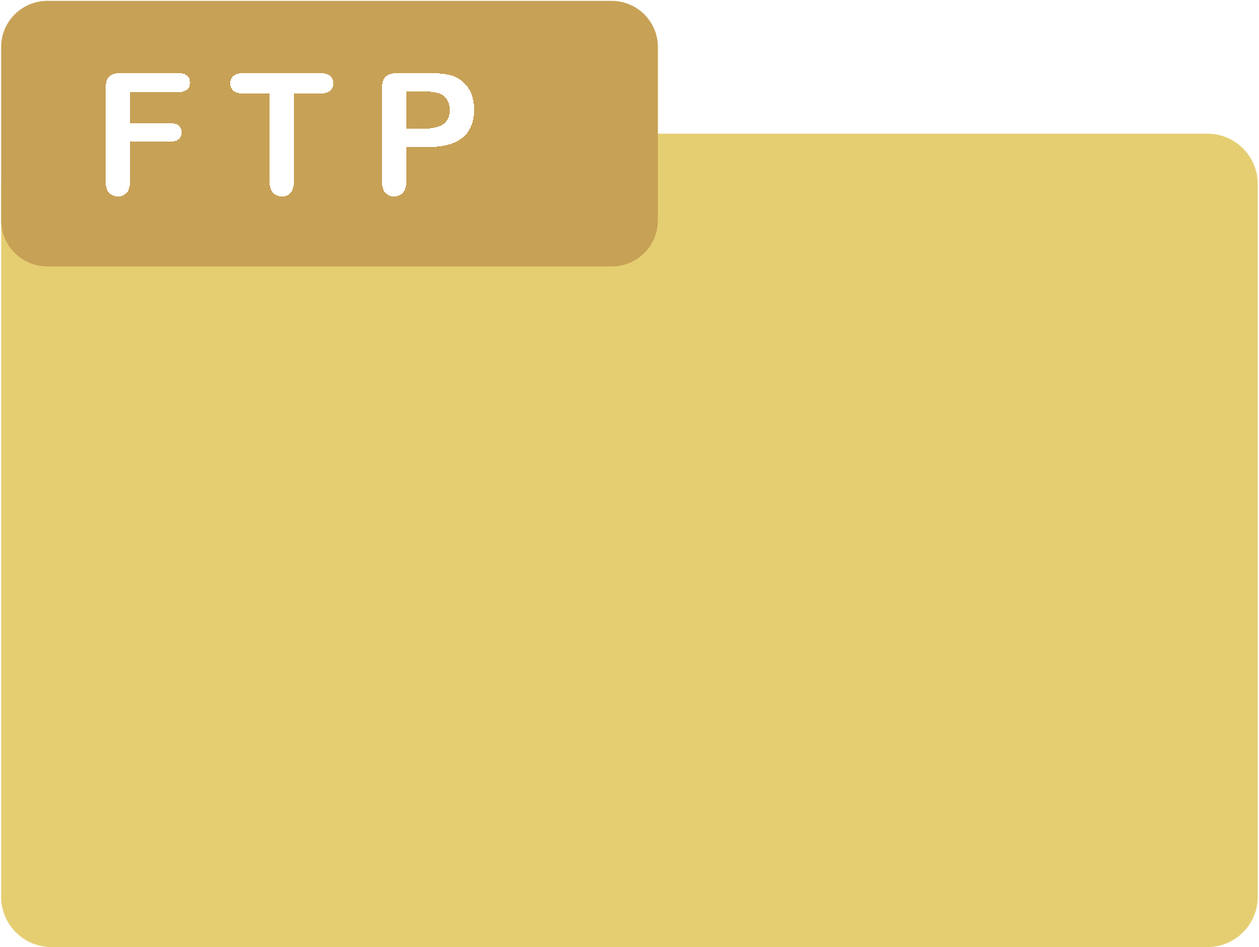
<style>
.page{position:relative;width:1259px;height:947px;background:#e5ce72}
.page>*{position:absolute;margin:0}
.t1{font:169.3px "ArialRoundedMTBold";letter-spacing:0.2em;color:#ffffff}
</style>
<div class="page">
<p class="t1" style="left:106px;top:73px;width:368px;height:123px">FTP</p>
</div>
